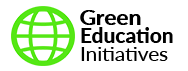
<style>
.page{position:relative;width:188px;height:71px;background:#ffffff}
.page>*{position:absolute;margin:0}
.t1{font:19.9px "Lato-Heavy";color:#000000;scale:1.14 1}
.t2{font:19.9px "FiraSans-Heavy";color:#000000;scale:1.14 1}
.t3{font:19.9px "Lato-Heavy";color:#000000;scale:1.05 1}
.t4{font:19.9px "FiraSans-Heavy";color:#000000;scale:1.05 1}
.t5{font:19.9px "Lato-Regular";color:#000000;scale:1.04 1}
.t6{font:19.9px "FiraSans-Heavy";color:#000000;scale:1.04 1}
</style>
<div class="page">
<p class="t1" style="left:80px;top:10px;width:61px;height:15px"><span class="t2"> </span>Green</p>
<p class="t3" style="left:81px;top:27px;width:92px;height:16px"><span class="t4"> </span>Education</p>
<p class="t5" style="left:81px;top:47px;width:87px;height:14px"><span class="t6"> </span>Initiatives</p>
</div>
